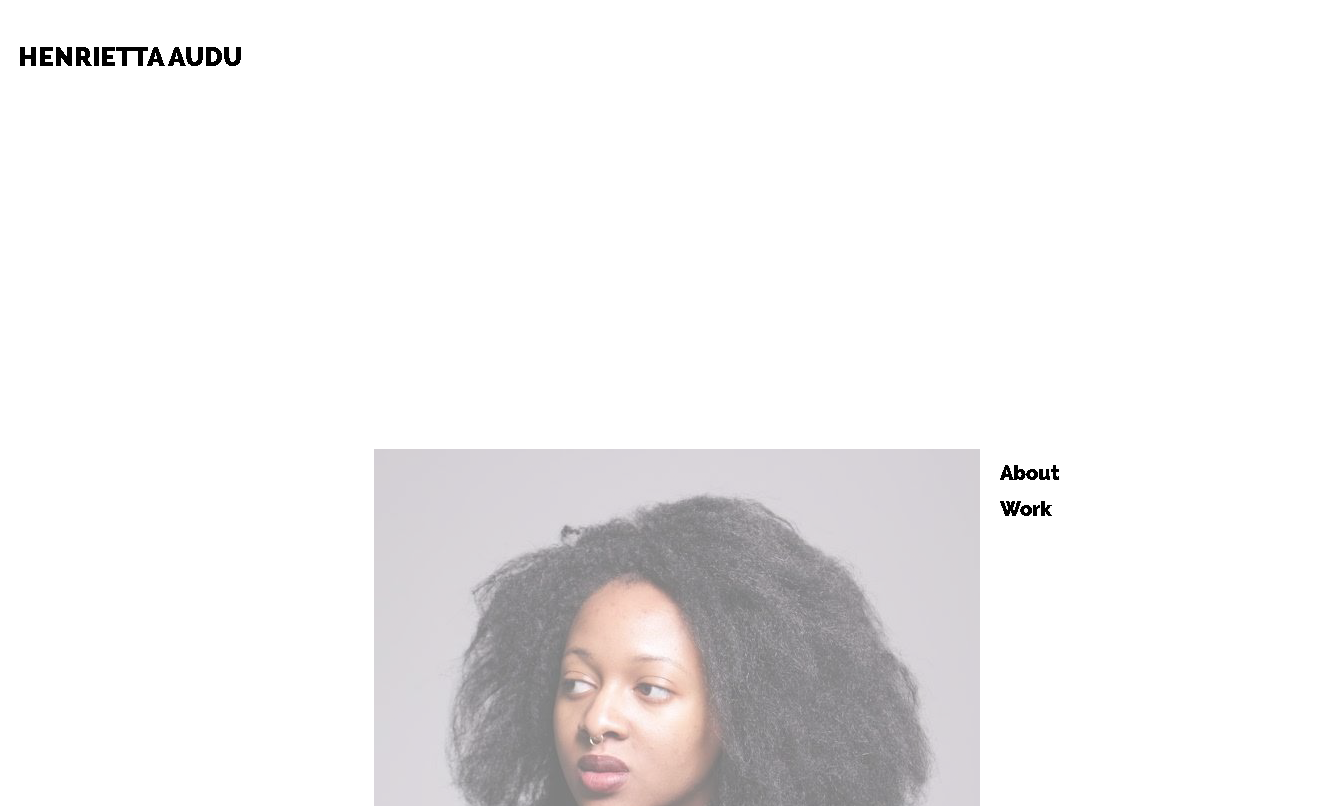
<style>
.page{position:relative;width:1341px;height:806px;background:#ffffff}
.page>*{position:absolute;margin:0}
.t1{font:26px "Raleway-Heavy";color:#000000}
.t2{font:20px/18px "Raleway-Heavy";color:#000000}
</style>
<div class="page">
<p class="t1" style="left:20px;top:47px;width:221px;height:19px">HENRIETTA AUDU</p>
<p class="t2" style="left:1000px;top:465px;width:59px;height:51px;text-align:justify">About    <br><br>Work</p>
</div>
